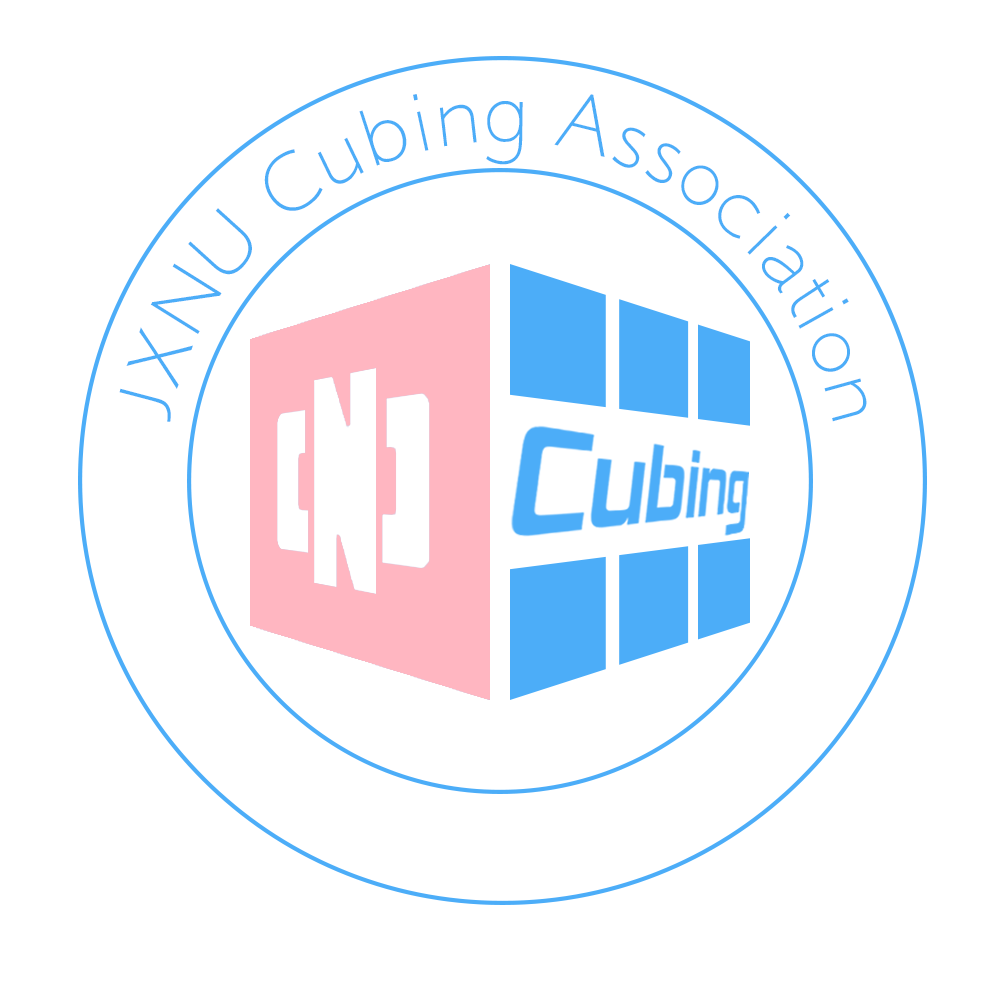
<style>
.page{position:relative;width:1000px;height:1000px;background:#ffffff}
.page>*{position:absolute;margin:0}
.t1{font:82.5px "-HYLiangPinXianJ";color:#4cadf8;scale:0.96 1}
</style>
<div class="page">
<p class="t1" style="left:119px;top:94px;width:748px;height:328px;rotate:12deg">JXNU Cubing Association</p>
</div>
